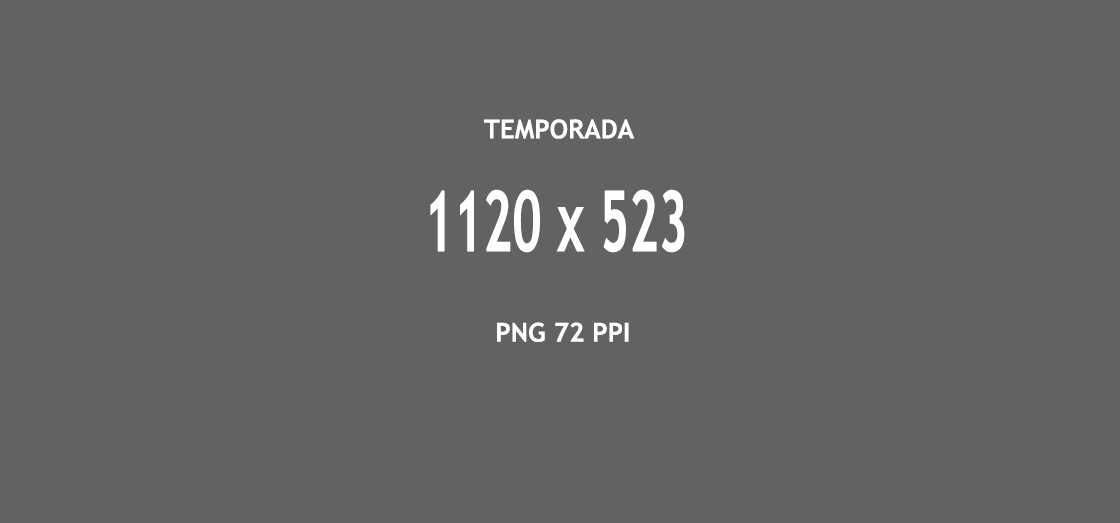
<style>
.page{position:relative;width:1120px;height:523px;background:#626262}
.page>*{position:absolute;margin:0}
.t1{font:26.2px "TrebuchetMS-Bold";color:#ffffff}
.t2{font:84.3px "TrebuchetMS-Bold";color:#ffffff;scale:0.6 1}
</style>
<div class="page">
<p class="t1" style="left:484px;top:119px;width:151px;height:20px">TEMPORADA</p>
<p class="t2" style="left:430px;top:189px;width:255px;height:64px">1120 x 523</p>
<p class="t1" style="left:497px;top:322px;width:132px;height:20px">PNG 72 PPI</p>
</div>
